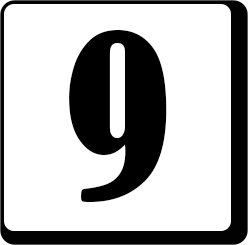
<style>
.page{position:relative;width:248px;height:245px;background:#ffffff}
.page>*{position:absolute;margin:0}
.t1{font:216px "BernardMT-Condensed";color:#010000}
</style>
<div class="page">
<p class="t1" style="left:69px;top:30px;width:98px;height:172px">9</p>
</div>
